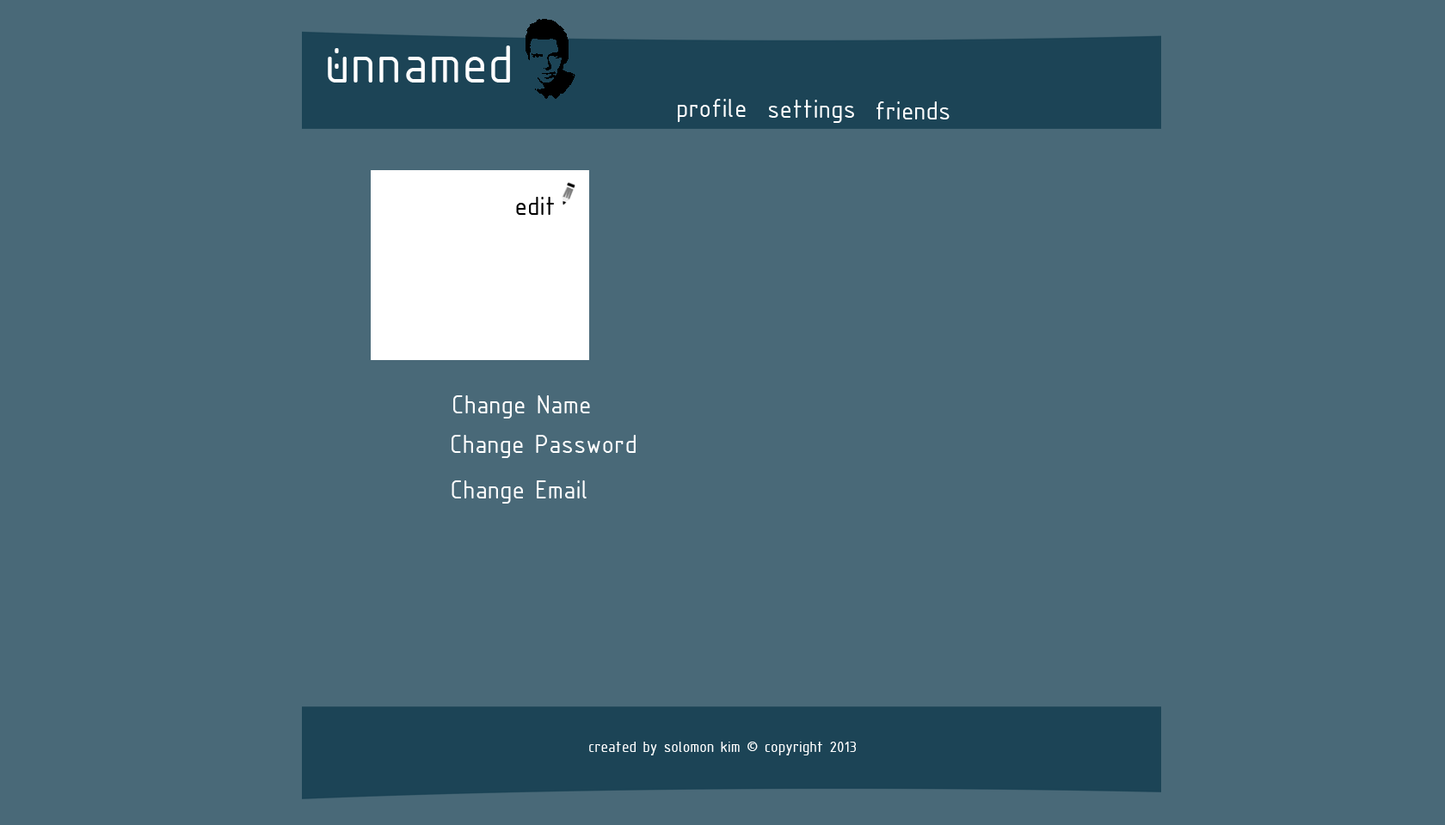
<style>
.page{position:relative;width:1445px;height:825px;background:#496978}
.page>*{position:absolute;margin:0}
.t1{font:57.8px "ISOCPEUR";color:#ffffff}
.t2{font:27.4px "ISOCPEUR";color:#ffffff}
.t3{font:27.4px "ISOCPEUR";color:#000000}
.t4{font:16.3px "ISOCPEUR";color:#ffffff}
</style>
<div class="page">
<p class="t1" style="left:328px;top:46px;width:182px;height:37px">unnamed</p>
<p class="t1" style="left:334px;top:48px;width:5px;height:21px">:</p>
<p class="t2" style="left:678px;top:99px;width:67px;height:23px">profile</p>
<p class="t2" style="left:769px;top:100px;width:85px;height:23px">settings</p>
<p class="t2" style="left:876px;top:101px;width:73px;height:19px">friends</p>
<p class="t3" style="left:516px;top:197px;width:38px;height:18px">edit</p>
<p class="t2" style="left:453px;top:396px;width:137px;height:23px">Change Name</p>
<p class="t2" style="left:451px;top:435px;width:184px;height:23px">Change Password</p>
<p class="t2" style="left:451px;top:481px;width:135px;height:23px">Change Email</p>
<p class="t4" style="left:589px;top:742px;width:267px;height:14px">created by solomon kim © copyright 2013</p>
</div>
